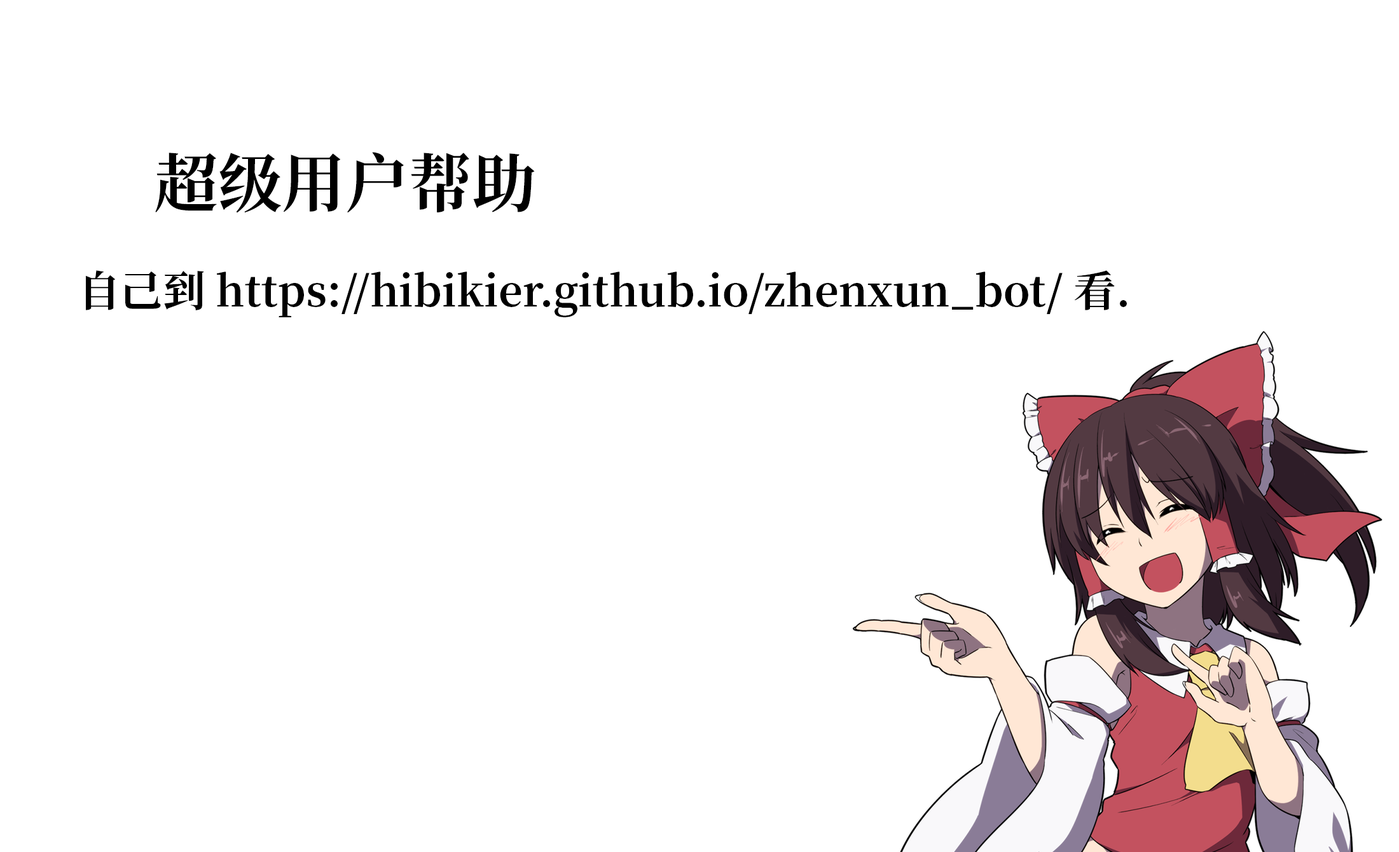
<style>
.page{position:relative;width:1399px;height:852px;background:#ffffff}
.page>*{position:absolute;margin:0}
.t1{font:63.6px "NotoSerifSC-Bold";color:#000000}
.t2{font:42.4px "NotoSerifSC-Bold";color:#000000}
</style>
<div class="page">
<p class="t1" style="left:155px;top:152px;width:380px;height:61px">超级用户帮助</p>
<p class="t2" style="left:86px;top:270px;width:1041px;height:47px">自己到 https://hibikier.github.io/zhenxun_bot/ 看.</p>
</div>
